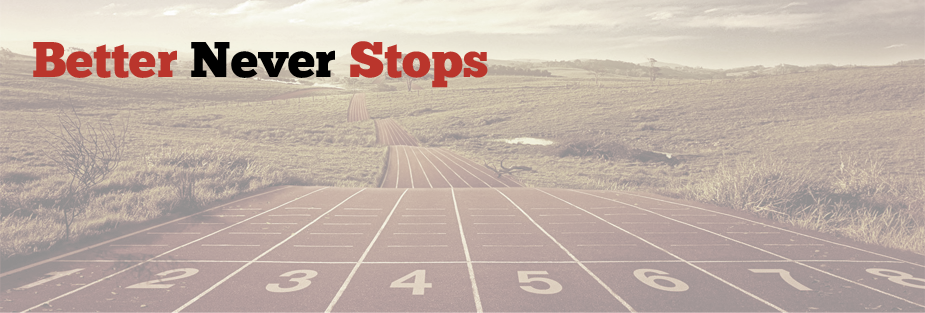
<style>
.page{position:relative;width:925px;height:313px}
.page>*{position:absolute;margin:0}
.t1{font:50px "ChunkFive-Roman";color:#ba352c}
.t2{font:50px "ChunkFive-Roman";color:#000000}
</style>
<div class="page">
<p class="t1" style="left:33px;top:41px;width:455px;height:47px">Better <span class="t2">Never</span> Stops</p>
</div>
